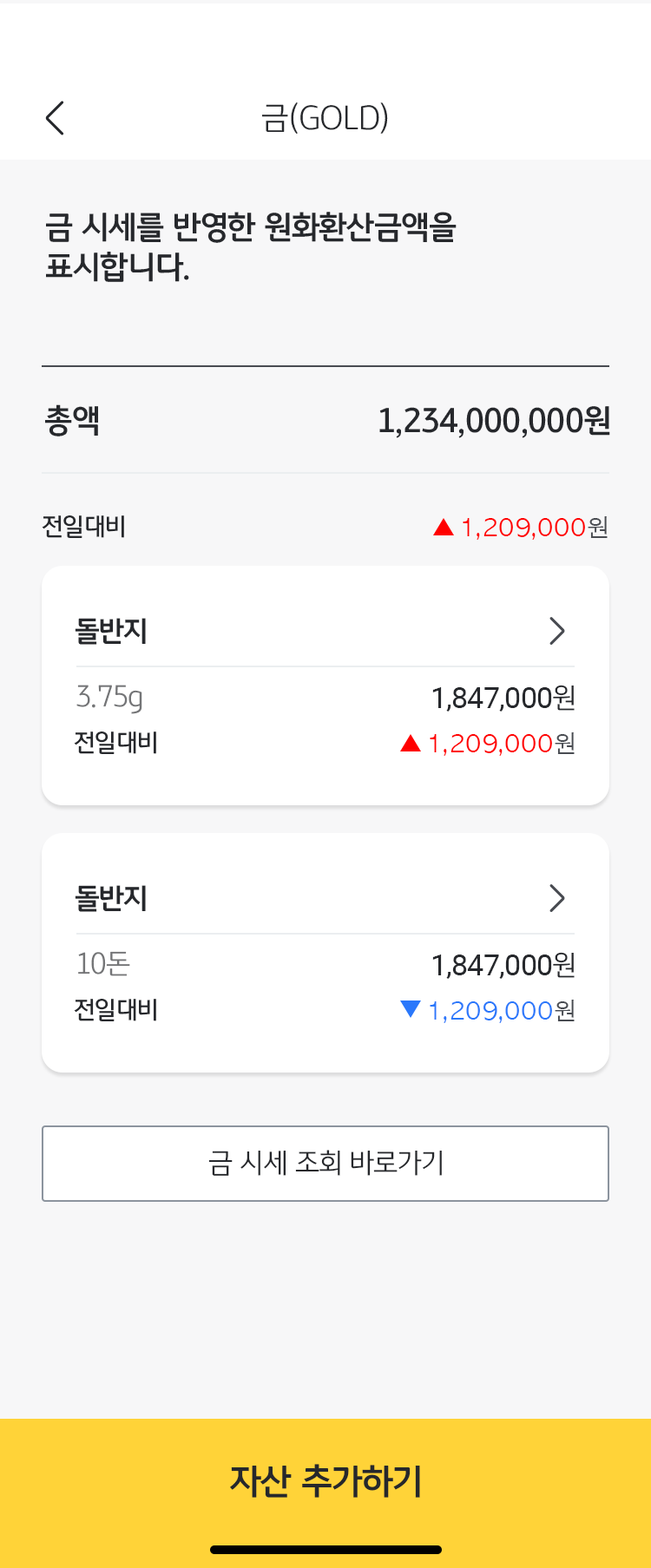
<style>
.page{position:relative;width:651px;height:1568px;background:#f7f7f8}
.page>*{position:absolute;margin:0}
.t1{font:31.2px "KBFGText-Light";letter-spacing:-0.02em;color:#26282c}
.t2{font:31.2px/39.9px "KBFGText-Bold";letter-spacing:-0.02em;color:#26282c}
.t3{font:31.2px "KBFGText-Bold";letter-spacing:-0.02em;color:#26282c}
.t4{font:24.3px "KBFGText-Medium";letter-spacing:-0.01em;color:#26282c}
.t5{font:24.3px "AppleGothic";letter-spacing:-0.01em;color:#ff0000}
.t6{font:24.3px "AppleGothic";letter-spacing:-0.01em;color:#484b51}
.t7{font:27.8px "KBFGText-Bold";letter-spacing:-0.02em;color:#26282c}
.t8{font:27.8px "KBFGText-Light";letter-spacing:-0.02em;color:#747577}
.t9{font:29.5px "Roboto-Regular";letter-spacing:-0.02em;color:#26282c}
.t10{font:27.8px "KBFGText-Light";letter-spacing:-0.02em;color:#26282c}
.t11{font:24.3px "AppleGothic";letter-spacing:-0.01em;color:#2a78fb}
.t12{font:34.7px "KBFGText-Bold";letter-spacing:-0.02em;color:#26282c}
</style>
<div class="page">
<p class="t1" style="left:262px;top:102px;width:126px;height:32px">금(GOLD)</p>
<p class="t2" style="left:46px;top:212px;width:410px;height:70px">금 시세를 반영한 원화환산금액을 <br>표시합니다.</p>
<p class="t3" style="left:45px;top:404px;width:53px;height:32px">총액</p>
<p class="t3" style="left:379px;top:406px;width:231px;height:32px">1,234,000,000원</p>
<p class="t4" style="left:42px;top:515px;width:82px;height:23px">전일대비</p>
<p class="t5" style="left:463px;top:516px;width:144px;height:24px">1,209,000<span class="t6">원</span></p>
<p class="t7" style="left:75px;top:618px;width:71px;height:27px">돌반지</p>
<p class="t8" style="left:76px;top:685px;width:66px;height:29px">3.75g</p>
<p class="t9" style="left:432px;top:685px;width:142px;height:27px">1,847,000<span class="t10">원</span></p>
<p class="t4" style="left:74px;top:732px;width:82px;height:22px">전일대비</p>
<p class="t5" style="left:430px;top:732px;width:144px;height:24px">1,209,000<span class="t6">원</span></p>
<p class="t7" style="left:75px;top:885px;width:71px;height:27px">돌반지</p>
<p class="t8" style="left:78px;top:951px;width:52px;height:25px">10돈</p>
<p class="t9" style="left:432px;top:952px;width:142px;height:27px">1,847,000<span class="t10">원</span></p>
<p class="t4" style="left:74px;top:999px;width:82px;height:22px">전일대비</p>
<p class="t11" style="left:430px;top:1000px;width:144px;height:23px">1,209,000<span class="t6">원</span></p>
<p class="t10" style="left:208px;top:1150px;width:234px;height:26px">금 시세 조회 바로가기</p>
<p class="t12" style="left:230px;top:1464px;width:190px;height:34px">자산 추가하기</p>
</div>
